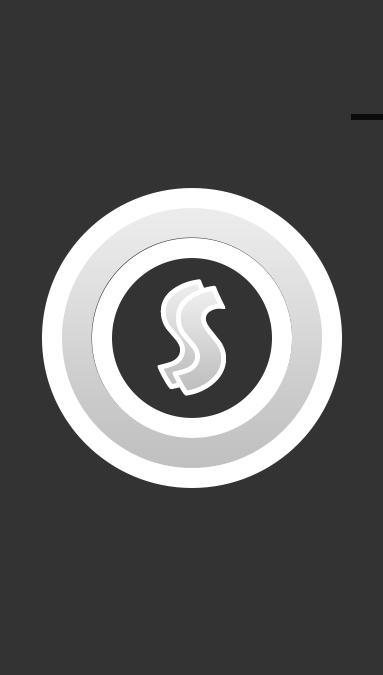
<style>
.page{position:relative;width:383px;height:675px;background:#333333}
.page>*{position:absolute;margin:0}
.t1{font:150px "BerlinSansFBDemi-Bold";letter-spacing:0.2em}
</style>
<div class="page">
<p class="t1" style="left:157px;top:279px;width:54px;height:110px">S</p>
<p class="t1" style="left:172px;top:285px;width:54px;height:111px">S</p>
</div>
